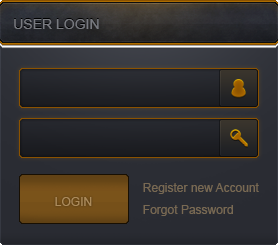
<style>
.page{position:relative;width:278px;height:245px}
.page>*{position:absolute;margin:0}
.t1{font:14px "ArialMT";color:#787a80}
.t2{font:12px "ArialMT";color:#776853}
.t3{font:12px "ArialMT";color:#ac8b5b}
.t4{font:12px "ArialMT";color:#786953}
</style>
<div class="page">
<p class="t1" style="left:14px;top:19px;width:85px;height:10px">USER LOGIN</p>
<p class="t2" style="left:143px;top:183px;width:116px;height:11px">Register new Account</p>
<p class="t3" style="left:55px;top:197px;width:37px;height:9px">LOGIN</p>
<p class="t4" style="left:143px;top:205px;width:90px;height:11px">Forgot Password</p>
</div>
